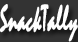
<style>
.page{position:relative;width:78px;height:42px;background:#333333}
.page>*{position:absolute;margin:0}
.t1{font:36.5px "Mistral";color:#ffffff;font-weight:bold;scale:0.56 1}
</style>
<div class="page">
<p class="t1" style="left:0px;top:4px;width:78px;height:38px">SnackTally</p>
</div>
